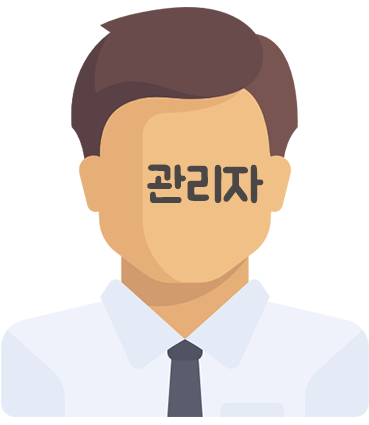
<style>
.page{position:relative;width:369px;height:425px;background:#ffffff}
.page>*{position:absolute;margin:0}
.t1{font:48px "BMJUA";color:#4c4747}
</style>
<div class="page">
<p class="t1" style="left:147px;top:164px;width:117px;height:40px">관리자</p>
</div>
